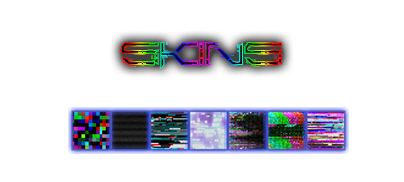
<style>
.page{position:relative;width:404px;height:182px;background:#ffffff}
.page>*{position:absolute;margin:0}
.t1{font:30px "Corruptor-LDR"}
</style>
<div class="page">
<p class="t1" style="left:121px;top:40px;width:163px;height:29px">SKINS</p>
</div>
